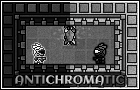
<style>
.page{position:relative;width:140px;height:90px}
.page>*{position:absolute;margin:0}
.t1{font:12px "Aclonica-Regular";color:#d0d0d0}
.t2{font:12px "Aclonica-Regular";color:#888888}
.t3{font:12px "Aclonica-Regular";color:#696969}
</style>
<div class="page">
<p class="t1" style="left:15px;top:75px;width:110px;height:11px"><span class="t2">ANTI</span>CHROMA<span class="t3">TIC</span></p>
</div>
